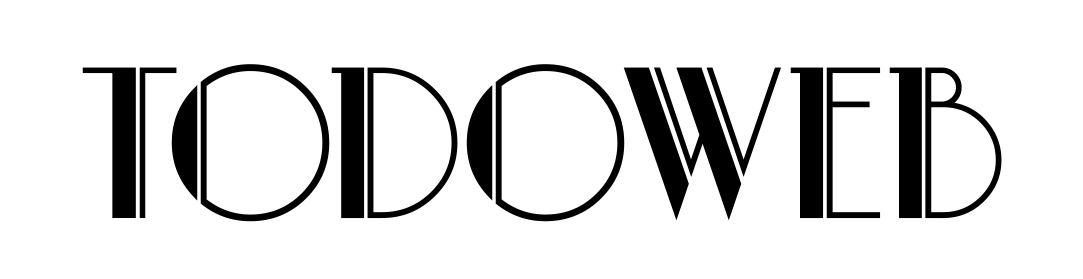
<style>
.page{position:relative;width:1083px;height:279px;background:#ffffff}
.page>*{position:absolute;margin:0}
.t1{font:200px "ParkLaneNF";color:#000000}
</style>
<div class="page">
<p class="t1" style="left:82px;top:64px;width:920px;height:158px">TODOWEB</p>
</div>
